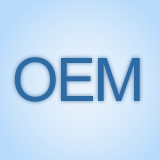
<style>
.page{position:relative;width:160px;height:160px}
.page>*{position:absolute;margin:0}
.t1{font:60px "ArialMT";letter-spacing:-0.04em;color:#2e6ba3}
</style>
<div class="page">
<p class="t1" style="left:14px;top:57px;width:126px;height:45px">OEM</p>
</div>
